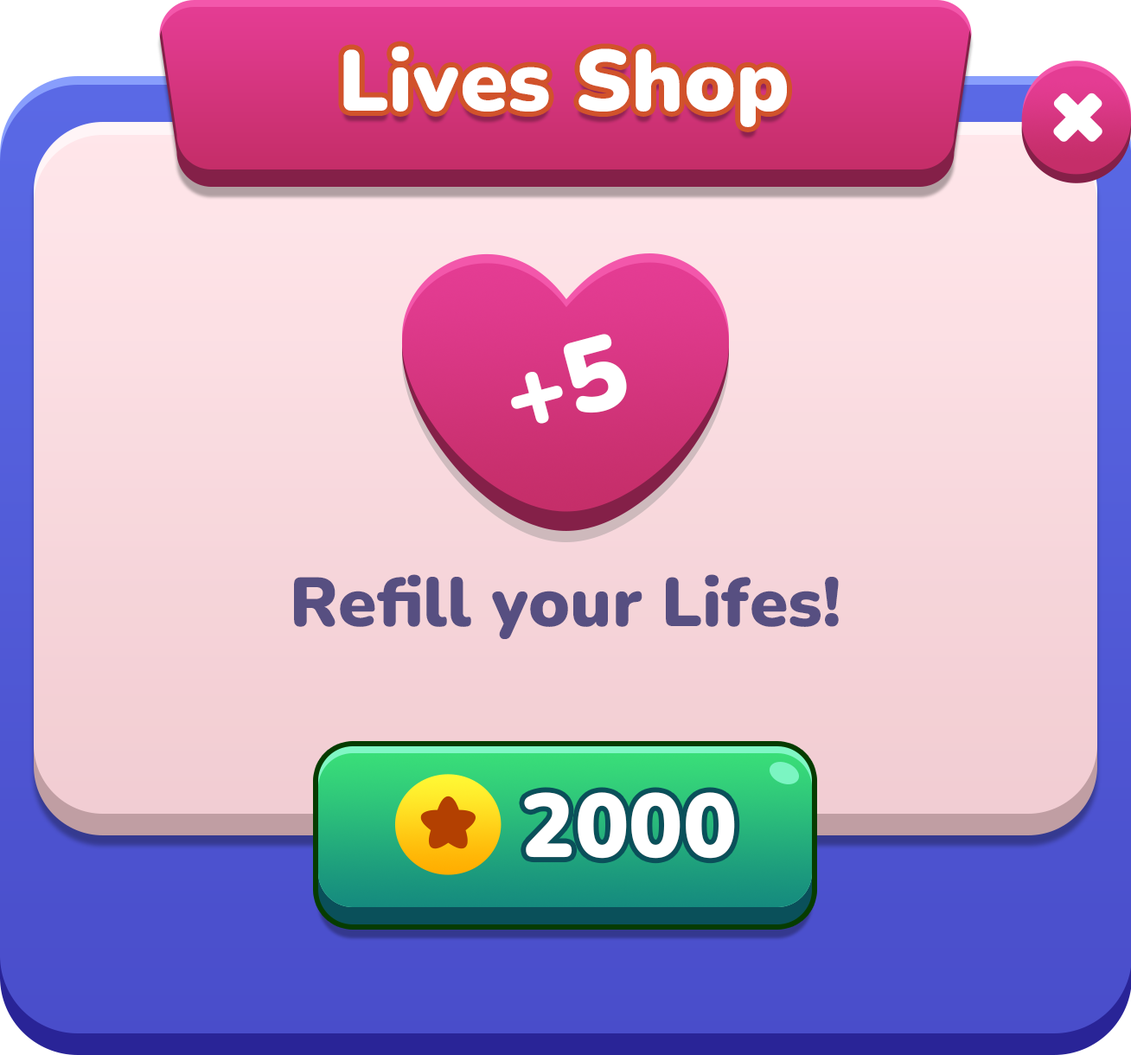
<style>
.page{position:relative;width:1131px;height:1055px}
.page>*{position:absolute;margin:0}
.t1{font:86.4px "Nunito-Black";color:#ffffff}
.t2{font:103.7px "Nunito-Black";color:#ffffff}
.t3{font:69.2px "Nunito-Black";color:#574f81}
.t4{font:89.9px "Nunito-Black";color:#ffffff}
</style>
<div class="page">
<p class="t1" style="left:343px;top:46px;width:444px;height:81px">Lives Shop</p>
<p class="t2" style="left:511px;top:334px;width:116px;height:90px;rotate:-15deg">+5</p>
<p class="t3" style="left:294px;top:574px;width:545px;height:65px">Refill your Lifes!</p>
<p class="t4" style="left:524px;top:792px;width:211px;height:66px">2000</p>
</div>
